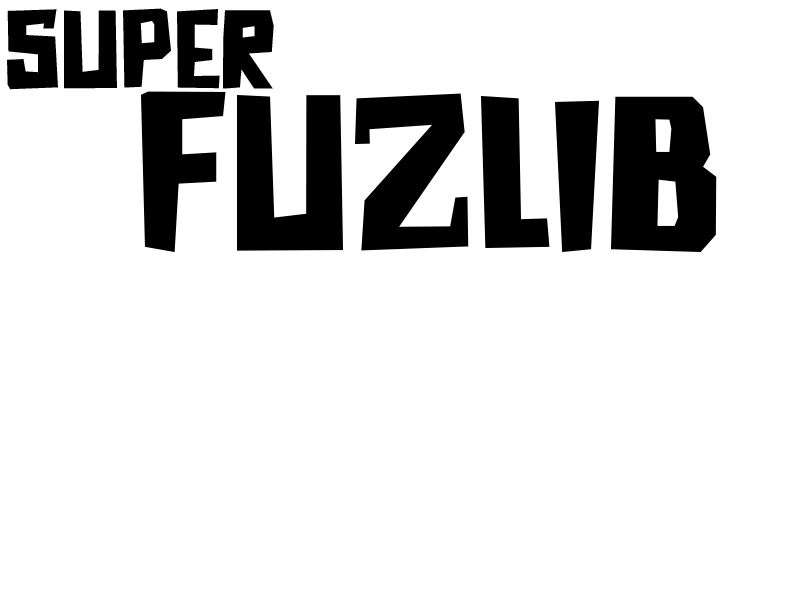
<style>
.page{position:relative;width:800px;height:600px;background:#ffffff}
.page>*{position:absolute;margin:0}
.t1{font:100px "DKAstromonkey";color:#000000}
.t2{font:200px "DKAstromonkey";color:#000000}
</style>
<div class="page">
<p class="t1" style="left:7px;top:8px;width:267px;height:82px">SUPER</p>
<p class="t2" style="left:141px;top:91px;width:576px;height:161px">FUZlib</p>
</div>
